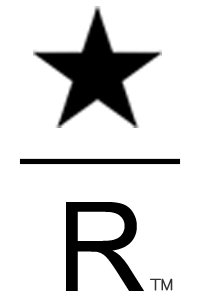
<style>
.page{position:relative;width:200px;height:300px;background:#ffffff}
.page>*{position:absolute;margin:0}
.t1{font:124.3px "ArialMT";color:#000000}
.t2{font:25.9px "Gulim";color:#333333}
</style>
<div class="page">
<p class="t1" style="left:66px;top:202px;width:78px;height:89px">R</p>
<p class="t2" style="left:150px;top:278px;width:23px;height:13px">™</p>
</div>
